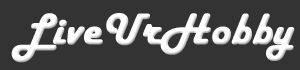
<style>
.page{position:relative;width:300px;height:70px;background:#333333}
.page>*{position:absolute;margin:0}
.t1{font:45.8px "HarlowSolid";color:#ffffff;font-weight:bold}
</style>
<div class="page">
<p class="t1" style="left:11px;top:13px;width:284px;height:50px">LiveUrHobby</p>
</div>
